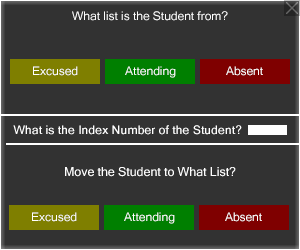
<style>
.page{position:relative;width:300px;height:250px;background:#323232}
.page>*{position:absolute;margin:0}
.t1{font:11.7px "MicrosoftSansSerif";color:#ffffff}
.t2{font:11.7px "MicrosoftSansSerif";color:#ffffff;scale:1.06 1}
.t3{font:12.5px "MicrosoftSansSerif";color:#ffffff}
</style>
<div class="page">
<p class="t1" style="left:72px;top:11px;width:156px;height:10px">What list is the Student from?</p>
<p class="t2" style="left:13px;top:125px;width:229px;height:10px">What is the Index Number of the Student?</p>
<p class="t3" style="left:65px;top:167px;width:171px;height:10px">Move the Student to What List?</p>
</div>
